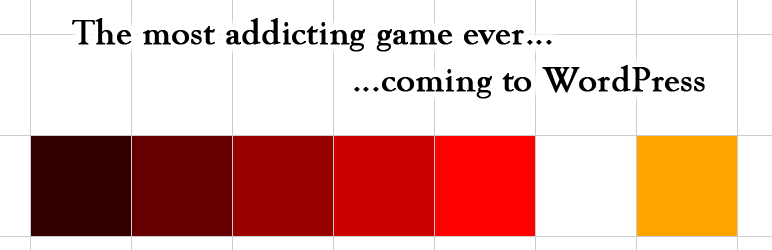
<style>
.page{position:relative;width:772px;height:250px;background:#ffffff}
.page>*{position:absolute;margin:0}
.t1{font:36px "GoudyOldStyleT-Regular";color:#000000;font-weight:bold}
</style>
<div class="page">
<p class="t1" style="left:72px;top:18px;width:480px;height:34px">The most addicting game ever...</p>
<p class="t1" style="left:354px;top:65px;width:351px;height:34px">...coming to WordPress</p>
</div>
